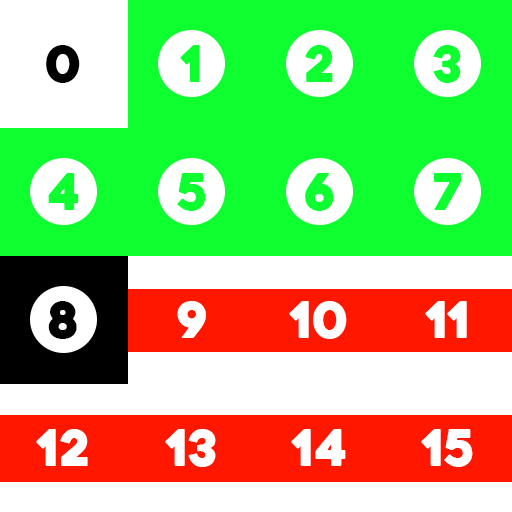
<style>
.page{position:relative;width:512px;height:512px;background:#ffffff}
.page>*{position:absolute;margin:0}
.t1{font:50px "Heavitas";color:#000000}
.t2{font:50px "Heavitas";color:#0eff30}
.t3{font:50px "Heavitas";color:#ffffff}
</style>
<div class="page">
<p class="t1" style="left:46px;top:45px;width:34px;height:38px">0</p>
<p class="t2" style="left:180px;top:45px;width:20px;height:37px">1</p>
<p class="t2" style="left:305px;top:45px;width:28px;height:37px">2</p>
<p class="t2" style="left:433px;top:45px;width:28px;height:38px">3</p>
<p class="t2" style="left:48px;top:173px;width:31px;height:37px">4</p>
<p class="t2" style="left:177px;top:173px;width:29px;height:38px">5</p>
<p class="t2" style="left:305px;top:173px;width:29px;height:38px">6</p>
<p class="t2" style="left:434px;top:173px;width:28px;height:37px">7</p>
<p class="t1" style="left:48px;top:301px;width:29px;height:38px">8</p>
<p class="t3" style="left:177px;top:301px;width:29px;height:37px">9</p>
<p class="t3" style="left:289px;top:301px;width:58px;height:38px">10</p>
<p class="t3" style="left:425px;top:301px;width:42px;height:37px">11</p>
<p class="t3" style="left:36px;top:429px;width:52px;height:37px">12</p>
<p class="t3" style="left:165px;top:429px;width:51px;height:38px">13</p>
<p class="t3" style="left:291px;top:429px;width:55px;height:37px">14</p>
<p class="t3" style="left:421px;top:429px;width:52px;height:38px">15</p>
</div>
